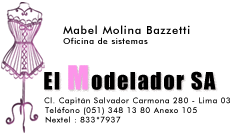
<style>
.page{position:relative;width:236px;height:134px;background:#ffffff}
.page>*{position:absolute;margin:0}
.t1{font:11.2px "FuturaBT-Medium";letter-spacing:0.065em;color:#000000}
.t2{font:8.4px "FuturaBT-Medium";letter-spacing:0.065em;color:#000000}
.t3{font:22.3px "Impact";letter-spacing:0.065em;color:#000000}
.t4{font:30.7px "Impact";letter-spacing:0.065em;color:#fd94ea}
.t5{font:7.9px "FuturaBT-Medium";letter-spacing:0.065em;color:#000000}
</style>
<div class="page">
<p class="t1" style="left:63px;top:25px;width:127px;height:19px">Mabel Molina Bazzetti<br><span class="t2">Oficina de sistemas</span></p>
<p class="t3" style="left:44px;top:65px;width:172px;height:25px">El <span class="t4">M</span>odelador SA</p>
<p class="t5" style="left:44px;top:97px;width:186px;height:8px">Cl. Capitán Salvador Carmona 280 - Lima 03</p>
<p class="t5" style="left:45px;top:107px;width:152px;height:16px">Teléfono (051) 348 13 80 Anexo 105<br>Nextel : 833*7937</p>
</div>
